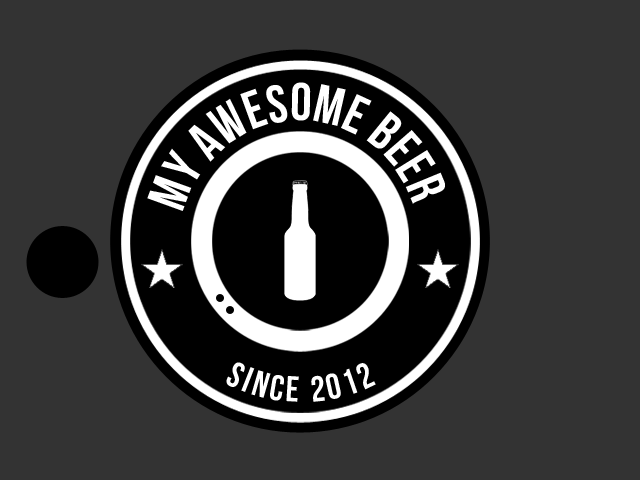
<style>
.page{position:relative;width:640px;height:480px;background:#333333}
.page>*{position:absolute;margin:0}
.t1{font:53.3px "BebasNeue";color:#ffffff;text-transform:uppercase}
.t2{font:36px "BebasNeue";letter-spacing:0.1em;color:#ffffff;text-transform:uppercase}
</style>
<div class="page">
<p class="t1" style="left:147px;top:82px;width:298px;height:129px">my awesome beer</p>
<p class="t2" style="left:226px;top:362px;width:150px;height:40px">SINCE 2012</p>
</div>
